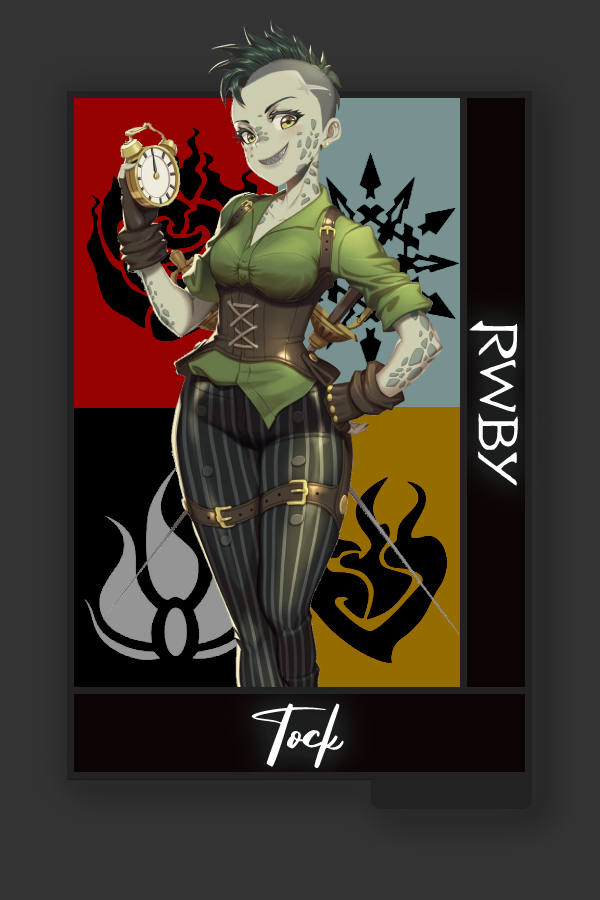
<style>
.page{position:relative;width:600px;height:900px;background:#333333}
.page>*{position:absolute;margin:0}
.t1{font:61.3px "RWBY_Style";color:#ffffff;scale:1.25 1}
.t2{font:76.6px "RosegaFREE";color:#ffffff;scale:0.91 1}
</style>
<div class="page">
<p class="t1" style="left:469px;top:320px;width:49px;height:166px;rotate:90deg">RWBY</p>
<p class="t2" style="left:251px;top:703px;width:93px;height:66px">Tock</p>
</div>
